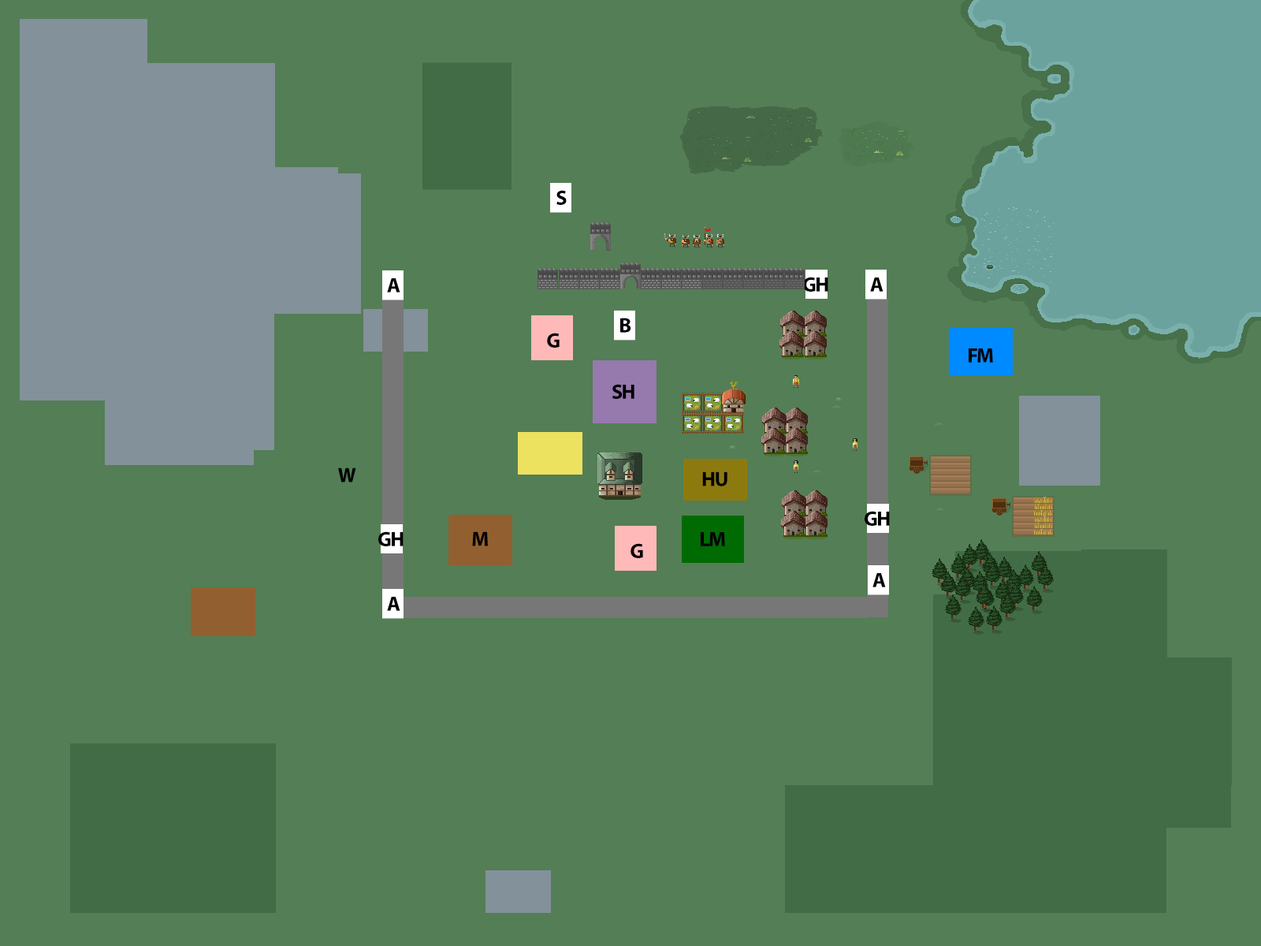
<style>
.page{position:relative;width:1261px;height:946px;background:#547e56}
.page>*{position:absolute;margin:0}
.t1{font:20.7px "MyriadPro-Bold";letter-spacing:-0.06em;color:#000000}
</style>
<div class="page">
<p class="t1" style="left:556px;top:190px;width:11px;height:15px">S</p>
<p class="t1" style="left:387px;top:278px;width:13px;height:14px">A</p>
<p class="t1" style="left:803px;top:277px;width:25px;height:15px">GH</p>
<p class="t1" style="left:870px;top:277px;width:13px;height:15px">A</p>
<p class="t1" style="left:620px;top:318px;width:11px;height:15px">B</p>
<p class="t1" style="left:547px;top:333px;width:13px;height:15px">G</p>
<p class="t1" style="left:969px;top:348px;width:24px;height:15px">FM</p>
<p class="t1" style="left:612px;top:384px;width:22px;height:15px">SH</p>
<p class="t1" style="left:338px;top:467px;width:18px;height:15px">W</p>
<p class="t1" style="left:702px;top:471px;width:25px;height:15px">HU</p>
<p class="t1" style="left:865px;top:511px;width:25px;height:15px">GH</p>
<p class="t1" style="left:378px;top:531px;width:25px;height:15px">GH</p>
<p class="t1" style="left:472px;top:531px;width:16px;height:15px">M</p>
<p class="t1" style="left:701px;top:532px;width:24px;height:14px">LM</p>
<p class="t1" style="left:630px;top:543px;width:13px;height:15px">G</p>
<p class="t1" style="left:872px;top:573px;width:14px;height:14px">A</p>
<p class="t1" style="left:387px;top:597px;width:13px;height:14px">A</p>
</div>
